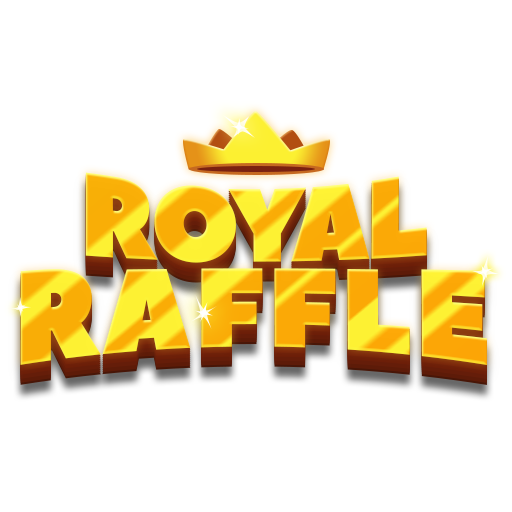
<style>
.page{position:relative;width:512px;height:512px;background:#ffffff}
.page>*{position:absolute;margin:0}
.t1{font:119.8px "PeaceSans";letter-spacing:-0.05em;scale:0.87 1}
.t2{font:134.2px "PeaceSans";letter-spacing:0.025em;scale:0.87 1}
</style>
<div class="page">
<p class="t1" style="left:85px;top:172px;width:342px;height:91px">ROYAL</p>
<p class="t2" style="left:20px;top:268px;width:467px;height:97px">RAFFLE</p>
</div>
